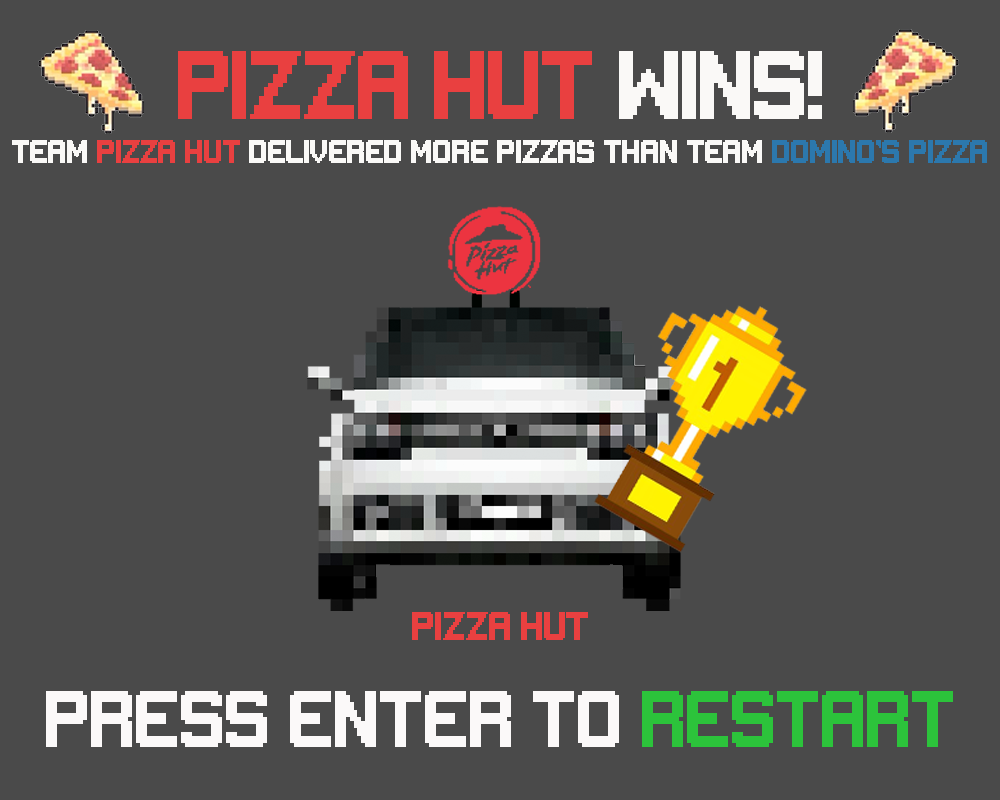
<style>
.page{position:relative;width:1000px;height:800px;background:#4a4a4a}
.page>*{position:absolute;margin:0}
.t1{font:72px "Gameplay";color:#e94040}
.t2{font:72px "Gameplay";color:#faf9f7}
.t3{font:24px "Gameplay";color:#faf9f7}
.t4{font:24px "Gameplay";color:#e94040}
.t5{font:24px "Gameplay";color:#2c78ad}
.t6{font:30px "Gameplay";color:#e94040}
.t7{font:60px "Gameplay";color:#fbf9f9}
.t8{font:60px "Gameplay";color:#2cc33b}
</style>
<div class="page">
<p class="t1" style="left:178px;top:51px;width:644px;height:68px">Pizza Hut <span class="t2">WIns!</span></p>
<p class="t3" style="left:12px;top:140px;width:975px;height:23px">Team<span class="t4"> Pizza hut </span>delivered more Pizzas than Team <span class="t5">DOmino’s Pizza</span></p>
<p class="t6" style="left:412px;top:612px;width:176px;height:28px">Pizza hut</p>
<p class="t7" style="left:46px;top:691px;width:907px;height:56px">Press enter to <span class="t8">restart</span></p>
</div>
